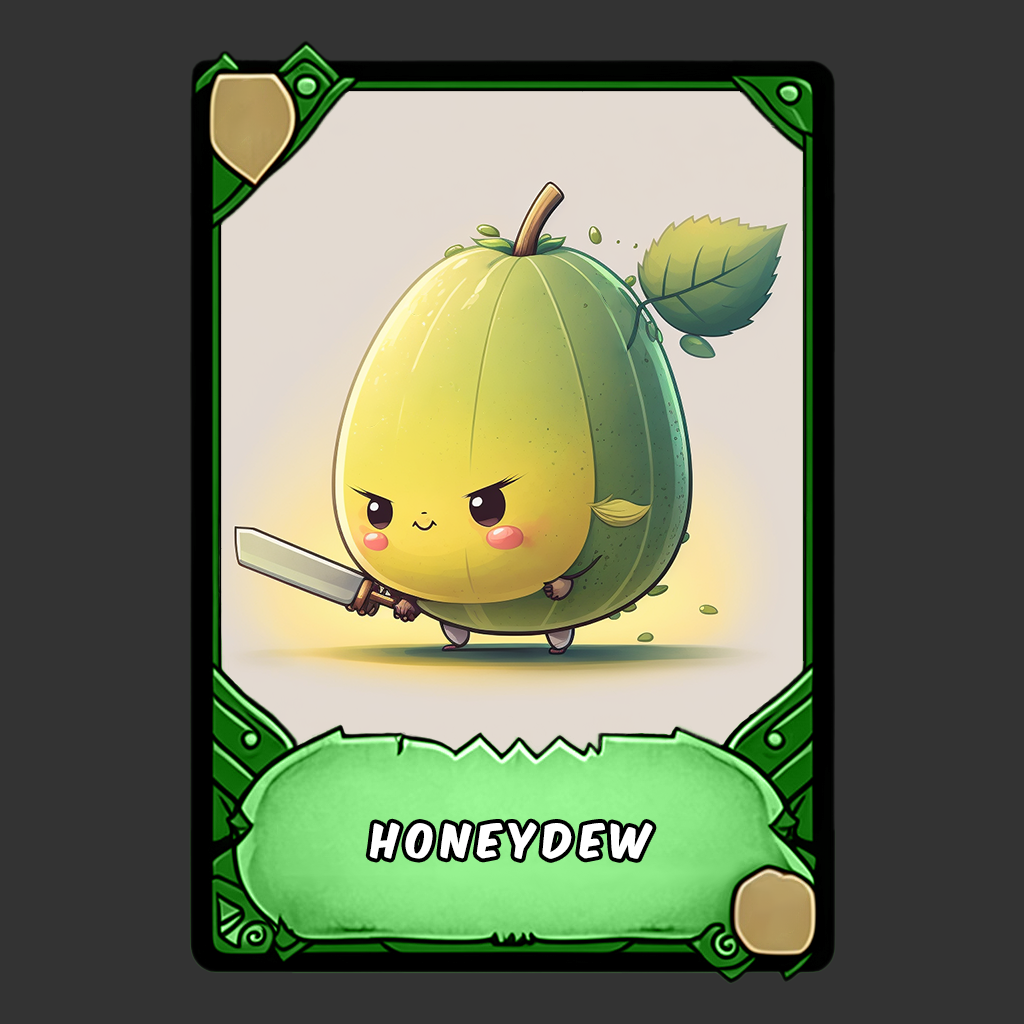
<style>
.page{position:relative;width:1024px;height:1024px;background:#333333}
.page>*{position:absolute;margin:0}
.t1{font:40px "KomikaAxis";letter-spacing:0.2em;color:#ffffff}
</style>
<div class="page">
<p class="t1" style="left:369px;top:822px;width:284px;height:37px">honeydew</p>
</div>
